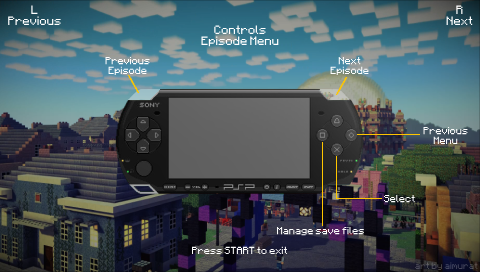
<style>
.page{position:relative;width:480px;height:272px}
.page>*{position:absolute;margin:0}
.t1{font:9.8px "Minecraft";color:#ffffff}
.t2{font:8.2px "Minecraft";color:#ffffff}
.t3{font:7.4px "Minecraft";color:#484759}
</style>
<div class="page">
<p class="t1" style="left:8px;top:5px;width:53px;height:20px;text-align:center">L<br>Previous</p>
<p class="t1" style="left:446px;top:5px;width:27px;height:20px;text-align:center">R<br>Next</p>
<p class="t1" style="left:201px;top:25px;width:78px;height:22px;text-align:center">Controls<br>Episode Menu</p>
<p class="t2" style="left:105px;top:57px;width:45px;height:18px;text-align:center">Previous<br>Episode</p>
<p class="t2" style="left:330px;top:57px;width:39px;height:18px;text-align:center">Next<br>Episode</p>
<p class="t2" style="left:423px;top:127px;width:45px;height:17px;text-align:center">Previous <br>Menu</p>
<p class="t2" style="left:384px;top:195px;width:31px;height:8px">Select</p>
<p class="t2" style="left:277px;top:227px;width:87px;height:9px">Manage save files</p>
<p class="t2" style="left:192px;top:246px;width:95px;height:8px">Press START to exit</p>
<p class="t3" style="left:415px;top:262px;width:63px;height:8px">art by aimurat</p>
</div>
